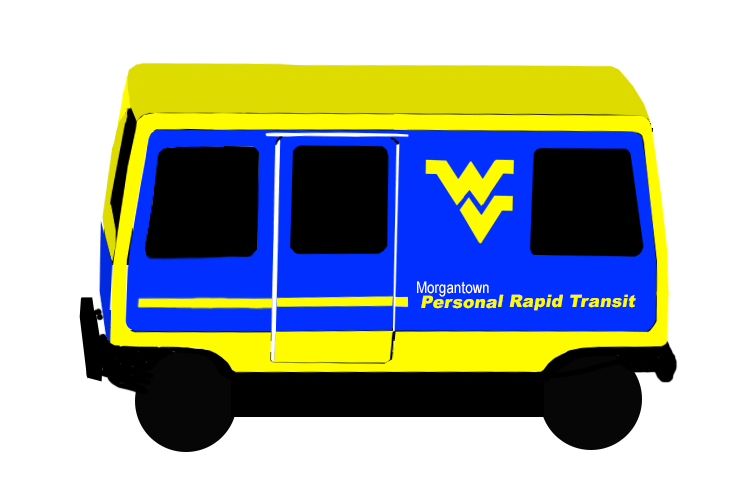
<style>
.page{position:relative;width:729px;height:500px;background:#ffffff}
.page>*{position:absolute;margin:0}
.t1{font:16px "ArialNarrow";letter-spacing:0.01em;color:#ffffff}
.t2{font:17px "Arial-Black";letter-spacing:0.01em;color:#fffc00;font-style:italic}
</style>
<div class="page">
<p class="t1" style="left:417px;top:281px;width:72px;height:16px">Morgantown</p>
<p class="t2" style="left:421px;top:294px;width:215px;height:17px">Personal Rapid Transit</p>
</div>
